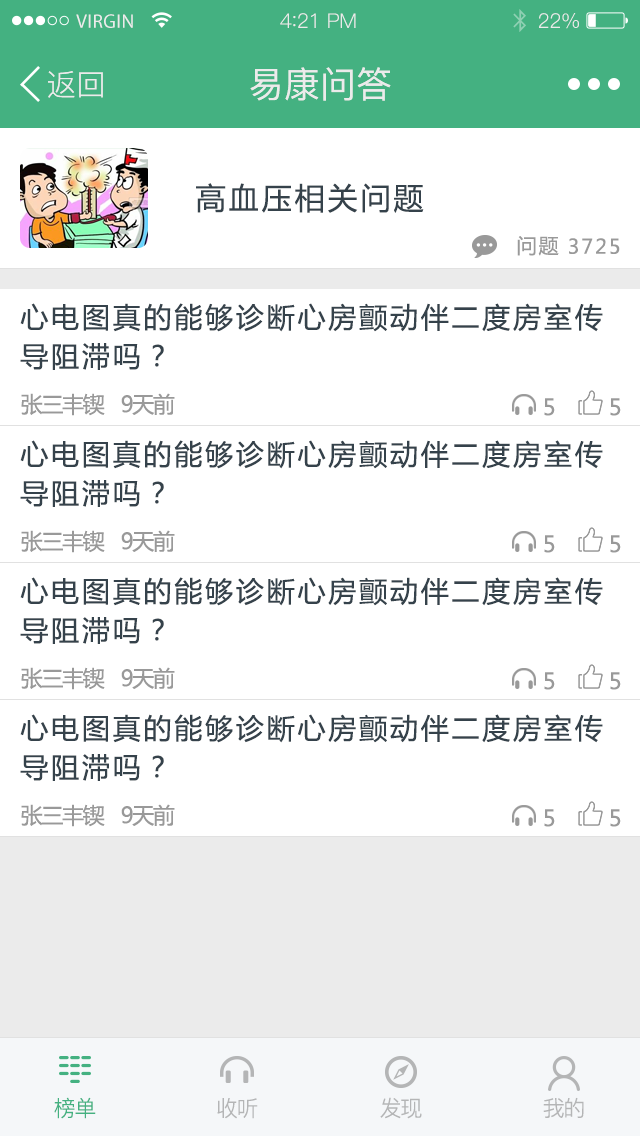
<style>
.page{position:relative;width:640px;height:1136px;background:#ffffff}
.page>*{position:absolute;margin:0}
.t1{font:19.6px "MyriadPro-Regular";letter-spacing:0.02em;color:#ebebeb}
.t2{font:20.4px "PingFang-SC-Regular";letter-spacing:-0.02em;color:#ebebeb}
.t3{font:22.1px "PingFang-SC-Regular";letter-spacing:-0.02em;color:#ebebeb}
.t4{font:30px "PingFang-SC-Regular";color:#ebebeb}
.t5{font:36px "PingFang-SC-Medium";color:#ebebeb}
.t6{font:30px "MicrosoftYaHei";letter-spacing:0.1em;color:#35424b}
.t7{font:20px "MicrosoftYaHei";letter-spacing:0.1em;color:#999999}
.t8{font:28px/39px "MicrosoftYaHei";letter-spacing:0.1em;color:#35424b}
.t9{font:22px "MicrosoftYaHei";letter-spacing:-0.06em;color:#999999}
.t10{font:22px "PingFang-SC-Regular";letter-spacing:-0.06em;color:#44b181}
.t11{font:22px "PingFang-SC-Regular";letter-spacing:-0.06em;color:#b4b5b6}
</style>
<div class="page">
<p class="t1" style="left:76px;top:14px;width:57px;height:14px">VIRGIN</p>
<p class="t1" style="left:76px;top:14px;width:57px;height:14px">VIRGIN</p>
<p class="t2" style="left:280px;top:13px;width:76px;height:15px">4<span class="t3">:</span>21 PM</p>
<p class="t2" style="left:280px;top:13px;width:76px;height:15px">4<span class="t3">:</span>21 PM</p>
<p class="t2" style="left:539px;top:13px;width:40px;height:16px">22%</p>
<p class="t2" style="left:539px;top:13px;width:40px;height:16px">22%</p>
<p class="t4" style="left:48px;top:71px;width:55px;height:27px">返回</p>
<p class="t4" style="left:48px;top:71px;width:55px;height:27px">返回</p>
<p class="t5" style="left:250px;top:67px;width:141px;height:34px">易康问答</p>
<p class="t5" style="left:250px;top:67px;width:141px;height:34px">易康问答</p>
<p class="t6" style="left:196px;top:183px;width:228px;height:30px">高血压相关问题</p>
<p class="t7" style="left:517px;top:236px;width:42px;height:20px">问题</p>
<p class="t7" style="left:569px;top:238px;width:51px;height:16px">3725</p>
<p class="t8" style="left:20px;top:303px;width:583px;height:67px">心电图真的能够诊断心房颤动伴二度房室传<br>导阻滞吗？</p>
<p class="t9" style="left:21px;top:393px;width:84px;height:23px">张三丰锲</p>
<p class="t9" style="left:121px;top:393px;width:54px;height:22px">9天前</p>
<p class="t9" style="left:544px;top:398px;width:11px;height:18px">5</p>
<p class="t9" style="left:610px;top:398px;width:11px;height:18px">5</p>
<p class="t8" style="left:20px;top:440px;width:583px;height:67px">心电图真的能够诊断心房颤动伴二度房室传<br>导阻滞吗？</p>
<p class="t9" style="left:21px;top:530px;width:84px;height:23px">张三丰锲</p>
<p class="t9" style="left:121px;top:530px;width:54px;height:22px">9天前</p>
<p class="t9" style="left:544px;top:535px;width:11px;height:18px">5</p>
<p class="t9" style="left:610px;top:535px;width:11px;height:18px">5</p>
<p class="t8" style="left:20px;top:577px;width:583px;height:67px">心电图真的能够诊断心房颤动伴二度房室传<br>导阻滞吗？</p>
<p class="t9" style="left:21px;top:667px;width:84px;height:23px">张三丰锲</p>
<p class="t9" style="left:121px;top:667px;width:54px;height:22px">9天前</p>
<p class="t9" style="left:544px;top:672px;width:11px;height:18px">5</p>
<p class="t9" style="left:610px;top:672px;width:11px;height:18px">5</p>
<p class="t8" style="left:20px;top:714px;width:583px;height:67px">心电图真的能够诊断心房颤动伴二度房室传<br>导阻滞吗？</p>
<p class="t9" style="left:21px;top:804px;width:84px;height:23px">张三丰锲</p>
<p class="t9" style="left:121px;top:804px;width:54px;height:22px">9天前</p>
<p class="t9" style="left:544px;top:809px;width:11px;height:18px">5</p>
<p class="t9" style="left:610px;top:809px;width:11px;height:18px">5</p>
<p class="t10" style="left:54px;top:1097px;width:42px;height:22px">榜单</p>
<p class="t10" style="left:54px;top:1097px;width:42px;height:22px">榜单</p>
<p class="t11" style="left:380px;top:1097px;width:42px;height:22px">发现</p>
<p class="t11" style="left:380px;top:1097px;width:42px;height:22px">发现</p>
<p class="t11" style="left:543px;top:1097px;width:41px;height:21px">我的</p>
<p class="t11" style="left:543px;top:1097px;width:41px;height:21px">我的</p>
<p class="t11" style="left:217px;top:1098px;width:41px;height:21px">收听</p>
<p class="t11" style="left:217px;top:1098px;width:41px;height:21px">收听</p>
</div>
